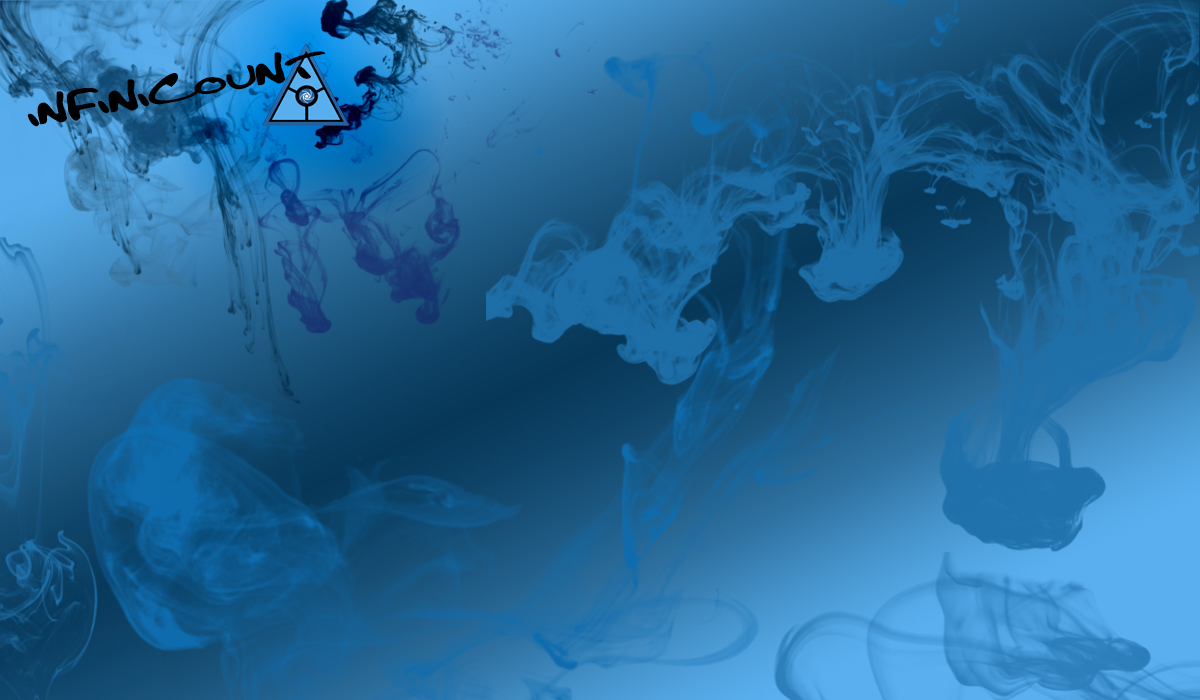
<style>
.page{position:relative;width:1200px;height:700px}
.page>*{position:absolute;margin:0}
.t1{font:41px "FatboySlimBLTC(BRK)";color:#000000;scale:1.27 1}
</style>
<div class="page">
<p class="t1" style="left:27px;top:51px;width:299px;height:76px;rotate:-10deg">INFINICOUNT</p>
</div>
